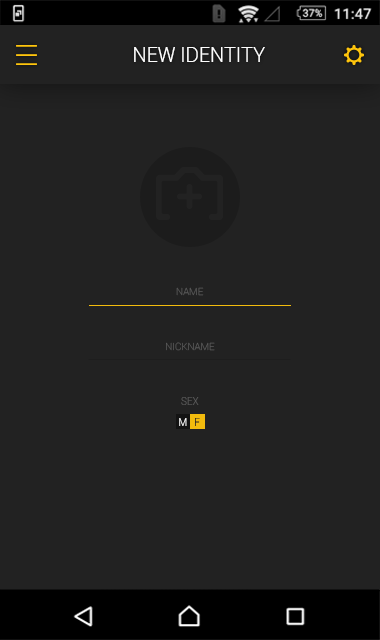
<style>
.page{position:relative;width:380px;height:640px;background:#222222}
.page>*{position:absolute;margin:0}
.t1{font:20px "Roboto-Light";color:#fefefe}
.t2{font:10px "Roboto-Thin";color:#595959}
.t3{font:10px "Roboto-Light";color:#595959}
.t4{font:10px "Roboto-Light";color:#fefefe}
.t5{font:10px "Roboto-Light"}
</style>
<div class="page">
<p class="t1" style="left:134px;top:47px;width:131px;height:15px">NEW IDENTITY</p>
<p class="t2" style="left:176px;top:287px;width:28px;height:9px">NAME</p>
<p class="t2" style="left:166px;top:342px;width:49px;height:9px">NICKNAME</p>
<p class="t3" style="left:181px;top:397px;width:18px;height:8px">SEX</p>
<p class="t4" style="left:179px;top:418px;width:8px;height:8px">M</p>
<p class="t5" style="left:195px;top:418px;width:5px;height:8px">F</p>
</div>
